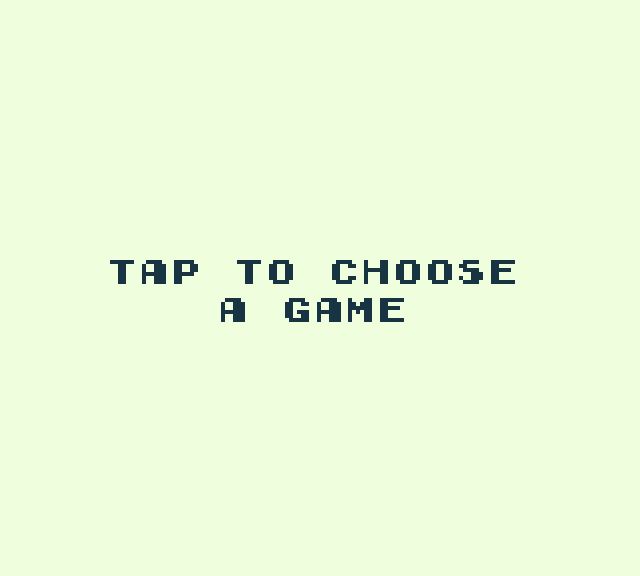
<style>
.page{position:relative;width:640px;height:576px;background:#efffde}
.page>*{position:absolute;margin:0}
.t1{font:31.7px "GamegirlClassic";color:#183442}
</style>
<div class="page">
<p class="t1" style="left:110px;top:260px;width:405px;height:62px;text-align:center">TAP TO CHOOSE<br>A GAME</p>
</div>
